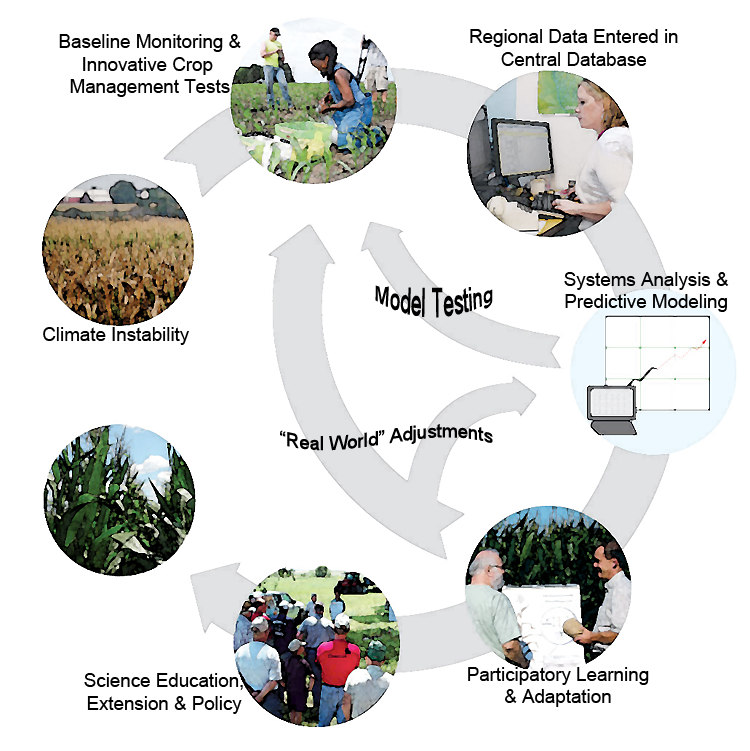
<style>
.page{position:relative;width:750px;height:751px;background:#ffffff}
.page>*{position:absolute;margin:0}
.t1{font:18.8px "ArialMT";color:#000000}
</style>
<div class="page">
<p class="t1" style="left:470px;top:29px;width:208px;height:37px;text-align:center">Regional Data Entered in<br>Central Database</p>
<p class="t1" style="left:59px;top:34px;width:182px;height:63px;text-align:center">Baseline Monitoring &amp;<br>Innovative Crop <br>Management Tests</p>
<p class="t1" style="left:564px;top:272px;width:165px;height:40px;text-align:center">Systems Analysis &amp;<br>Predictive Modeling</p>
<p class="t1" style="left:375px;top:285px;width:118px;height:33px;text-align:center">Model Testing</p>
<p class="t1" style="left:43px;top:327px;width:146px;height:18px">Climate Instability</p>
<p class="t1" style="left:280px;top:424px;width:213px;height:27px">“Real World” Adjustments</p>
<p class="t1" style="left:84px;top:673px;width:159px;height:41px;text-align:center">Science Education,<br>Extension &amp; Policy</p>
<p class="t1" style="left:468px;top:667px;width:181px;height:40px;text-align:center">Participatory Learning<br>&amp; Adaptation</p>
</div>
